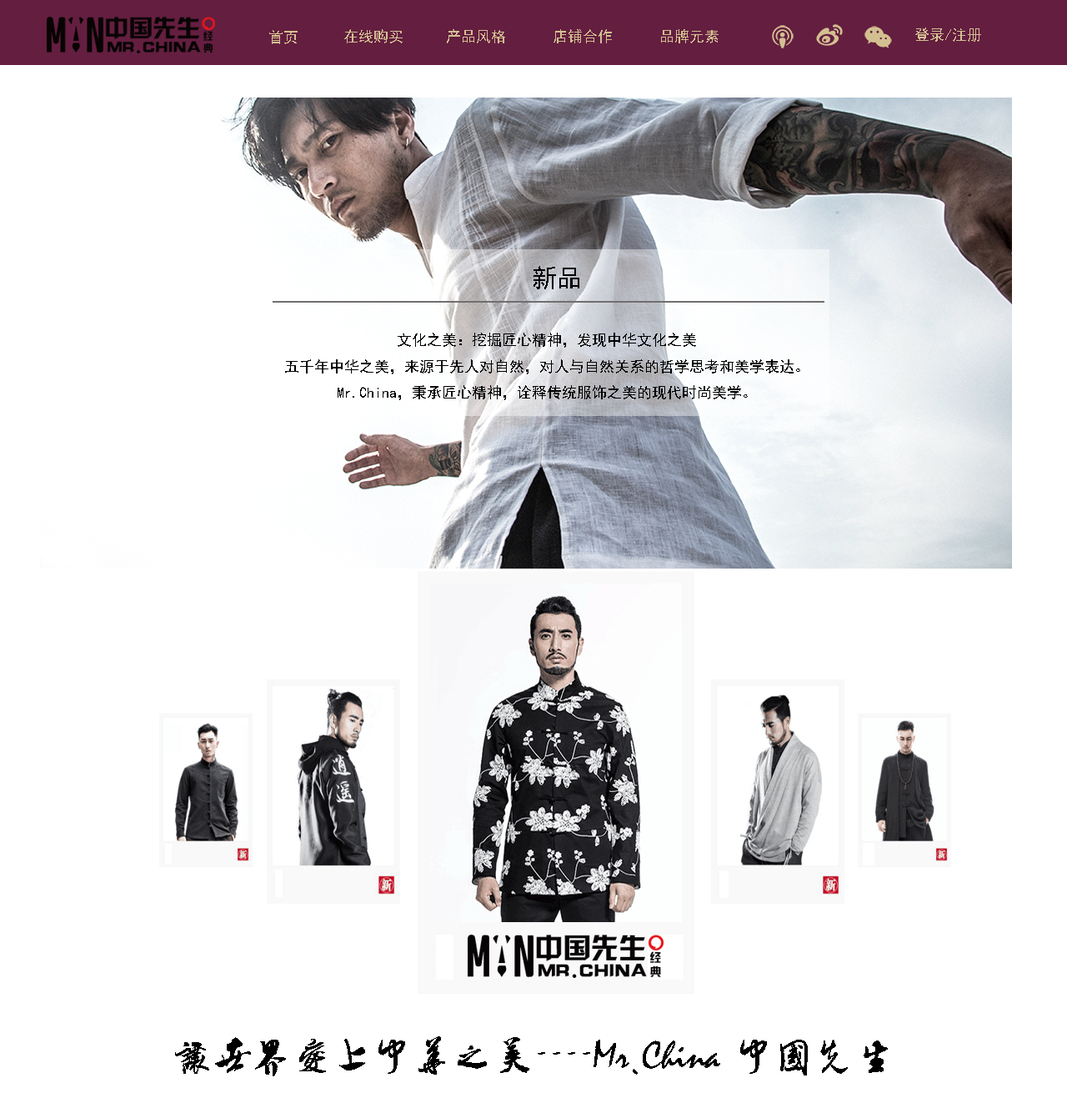
<style>
.page{position:relative;width:1067px;height:1118px;background:#ffffff}
.page>*{position:absolute;margin:0}
.t1{font:15px "SimHei";color:#d3c091}
.t2{font:25.1px "SimHei";color:#000000}
.t3{font:15px "SimHei";color:#000000}
.t4{font:40px "ÊéÌå·»Ã×ÜÀÌå";color:#000000}
.t5{font:40px " ¨²?S";color:#000000}
</style>
<div class="page">
<p class="t1" style="left:344px;top:29px;width:59px;height:14px">在线购买</p>
<p class="t1" style="left:447px;top:29px;width:58px;height:14px">产品风格</p>
<p class="t1" style="left:553px;top:29px;width:59px;height:14px">店铺合作</p>
<p class="t1" style="left:661px;top:29px;width:57px;height:14px">品牌元素</p>
<p class="t1" style="left:915px;top:28px;width:66px;height:14px">登录/注册</p>
<p class="t1" style="left:269px;top:30px;width:29px;height:14px">首页</p>
<p class="t2" style="left:533px;top:266px;width:46px;height:23px">新品</p>
<p class="t3" style="left:285px;top:333px;width:515px;height:67px;text-align:center">文化之美：挖掘匠心精神，发现中华文化之美<br>五千年中华之美，来源于先人对自然，对人与自然关系的哲学思考和美学表达。<br>Mr.China，秉承匠心精神，诠释传统服饰之美的现代时尚美学。</p>
<p class="t4" style="left:175px;top:1036px;width:713px;height:40px">让世界爱上中华之美<span class="t5">----</span>Mr.China 中国先生</p>
</div>
